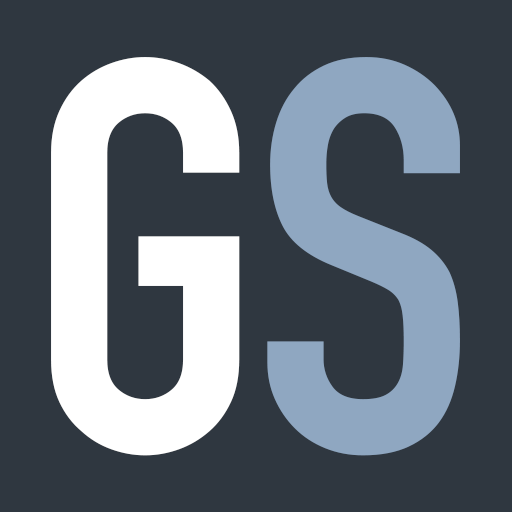
<style>
.page{position:relative;width:512px;height:512px;background:#2f3740}
.page>*{position:absolute;margin:0}
.t1{font:550px "DINCondensed-Bold";letter-spacing:-0.02em;color:#ffffff}
.t2{font:550px "DINCondensed-Bold";letter-spacing:-0.02em;color:#8fa7c1}
</style>
<div class="page">
<p class="t1" style="left:51px;top:57px;width:409px;height:399px">G<span class="t2">S</span></p>
</div>
